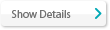
<style>
.page{position:relative;width:110px;height:30px;background:#ffffff}
.page>*{position:absolute;margin:0}
.t1{font:11px "MyriadPro-Regular";color:#737373}
</style>
<div class="page">
<p class="t1" style="left:11px;top:10px;width:60px;height:8px">Show Details</p>
</div>
